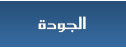
<style>
.page{position:relative;width:126px;height:48px}
.page>*{position:absolute;margin:0}
.t1{font:20px "SC_KHALID";color:#ffffff;scale:1.07 1}
</style>
<div class="page">
<p class="t1" style="left:38px;top:16px;width:48px;height:17px">الجودة</p>
</div>
